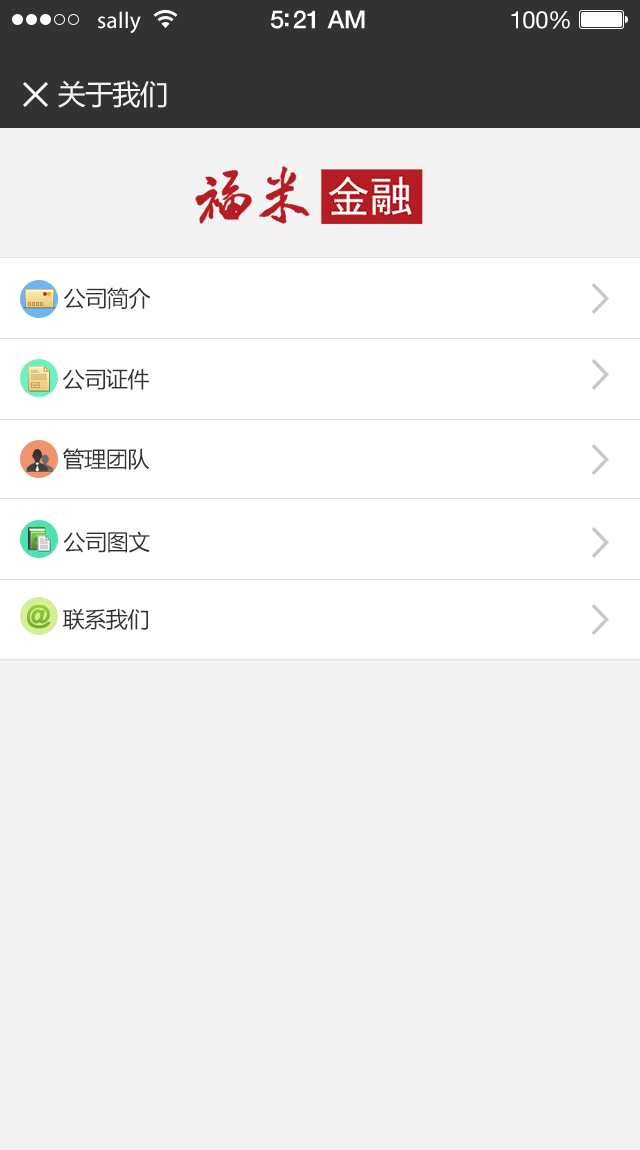
<style>
.page{position:relative;width:640px;height:1150px;background:#f3f3f3}
.page>*{position:absolute;margin:0}
.t1{font:23px "MyriadPro-Regular";letter-spacing:0.02em;color:#ffffff}
.t2{font:25px "HelveticaNeue-Medium";letter-spacing:-0.02em;color:#ffffff}
.t3{font:24px "HelveticaNeue";letter-spacing:-0.02em;color:#ffffff}
.t4{font:28px "MicrosoftYaHei";letter-spacing:-0.02em;color:#f3f3f3}
.t5{font:22px "MicrosoftYaHei";letter-spacing:-0.02em;color:#323232}
</style>
<div class="page">
<p class="t1" style="left:98px;top:11px;width:43px;height:23px">sally</p>
<p class="t2" style="left:271px;top:10px;width:94px;height:19px">5:21 AM</p>
<p class="t3" style="left:511px;top:11px;width:59px;height:18px">100%</p>
<p class="t4" style="left:58px;top:80px;width:109px;height:28px">关于我们</p>
<p class="t5" style="left:63px;top:287px;width:88px;height:23px">公司简介</p>
<p class="t5" style="left:62px;top:368px;width:87px;height:22px">公司证件</p>
<p class="t5" style="left:63px;top:448px;width:87px;height:22px">管理团队</p>
<p class="t5" style="left:63px;top:531px;width:87px;height:22px">公司图文</p>
<p class="t5" style="left:63px;top:608px;width:85px;height:22px">联系我们</p>
</div>
